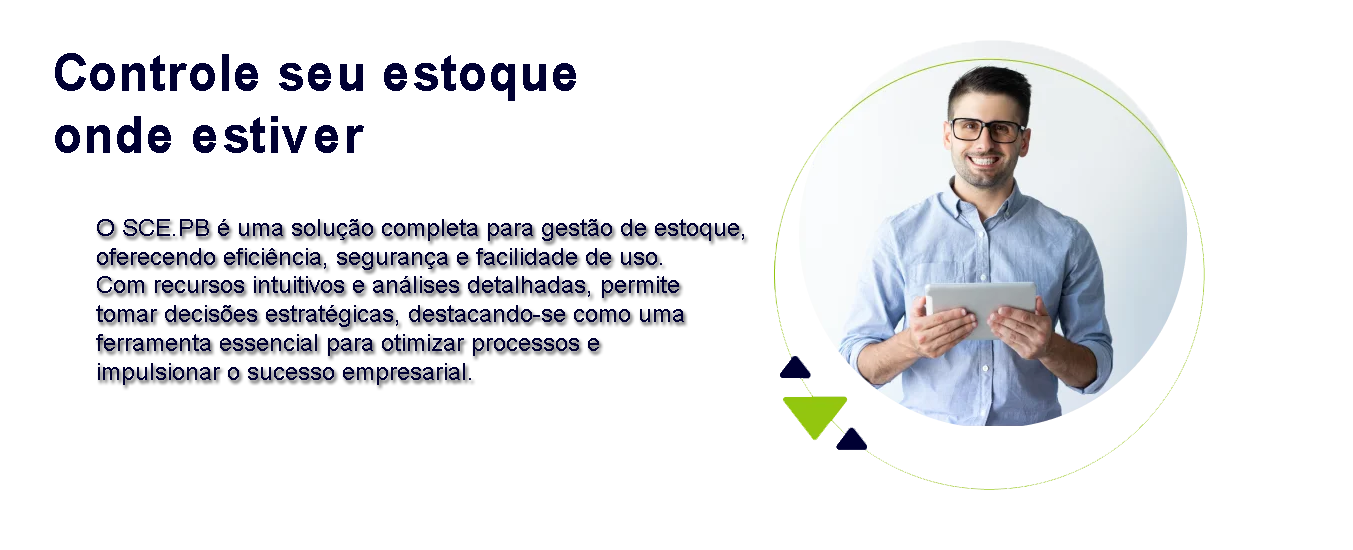
<style>
.page{position:relative;width:1353px;height:550px;background:#ffffff}
.page>*{position:absolute;margin:0}
.t1{font:52px "Arial-BoldMT";color:#000033;scale:0.93 1}
.t2{font:24px "ArialMT";color:#000033}
</style>
<div class="page">
<p class="t1" style="left:55px;top:53px;width:521px;height:100px">Controle seu estoque <br>onde estiver</p>
<p class="t2" style="left:96px;top:219px;width:648px;height:166px">O SCE.PB é uma solução completa para gestão de estoque, <br>oferecendo eficiência, segurança e facilidade de uso. <br>Com recursos intuitivos e análises detalhadas, permite <br>tomar decisões estratégicas, destacando-se como uma <br>ferramenta essencial para otimizar processos e <br>impulsionar o sucesso empresarial.</p>
</div>
